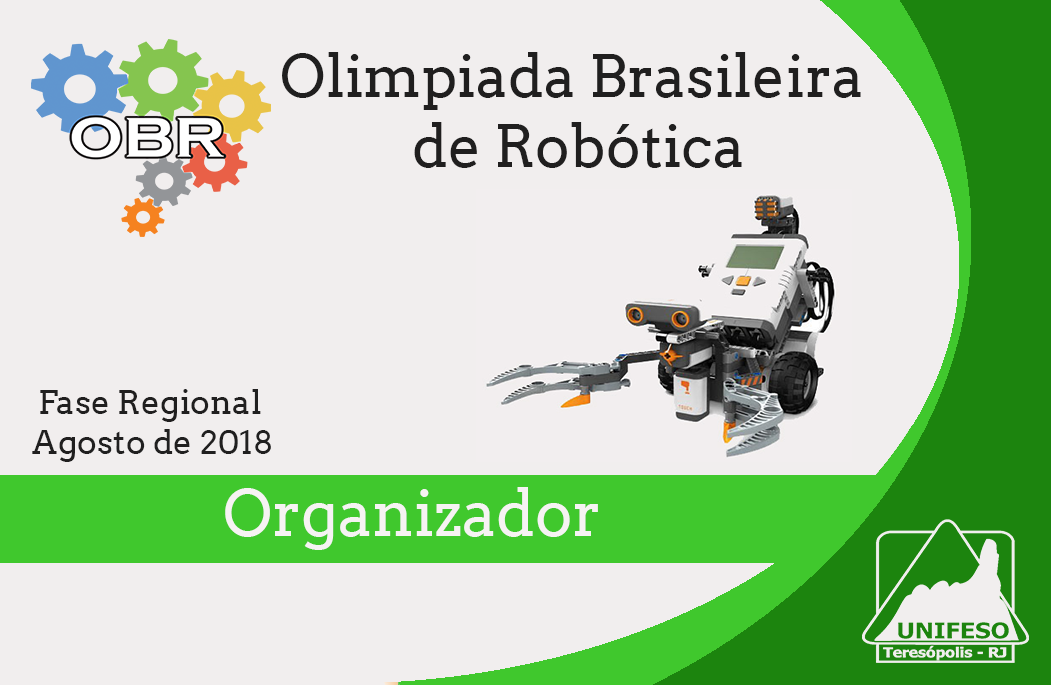
<style>
.page{position:relative;width:1051px;height:685px;background:#f1eeee}
.page>*{position:absolute;margin:0}
.t1{font:58.3px "Arvo";color:#201f1f}
.t2{font:33.3px "Arvo";color:#201f1f}
.t3{font:62.5px "Arvo";color:#f6f3f3}
</style>
<div class="page">
<p class="t1" style="left:282px;top:52px;width:579px;height:116px;text-align:center">Olimpiada Brasileira <br>de Robótica</p>
<p class="t2" style="left:32px;top:389px;width:239px;height:73px;text-align:center">Fase Regional <br>Agosto de 2018</p>
<p class="t3" style="left:225px;top:487px;width:373px;height:63px">Organizador</p>
</div>
